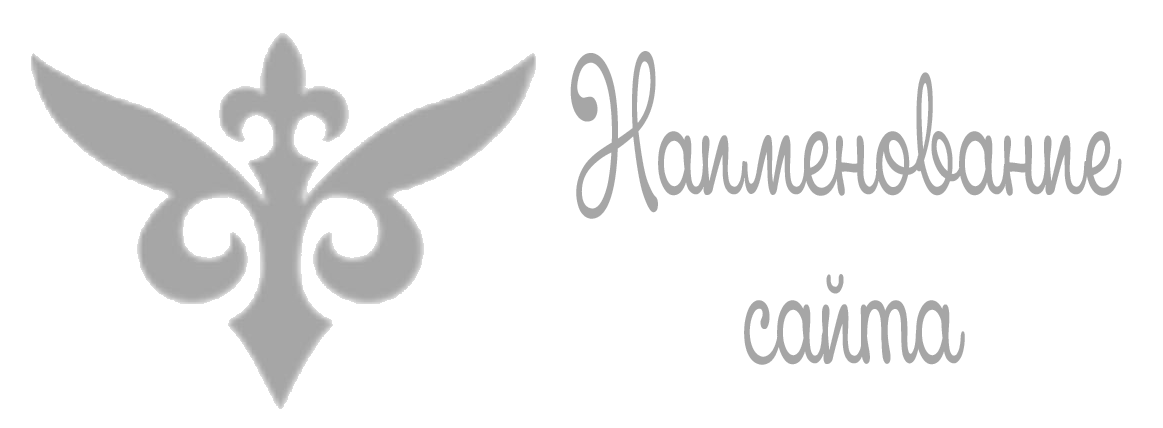
<style>
.page{position:relative;width:1163px;height:428px;background:#ffffff}
.page>*{position:absolute;margin:0}
.t1{font:140.8px "Xiomara";color:#a6a6a6;scale:0.57 1}
</style>
<div class="page">
<p class="t1" style="left:570px;top:51px;width:552px;height:314px;text-align:center">Наименование <br>сайта</p>
</div>
